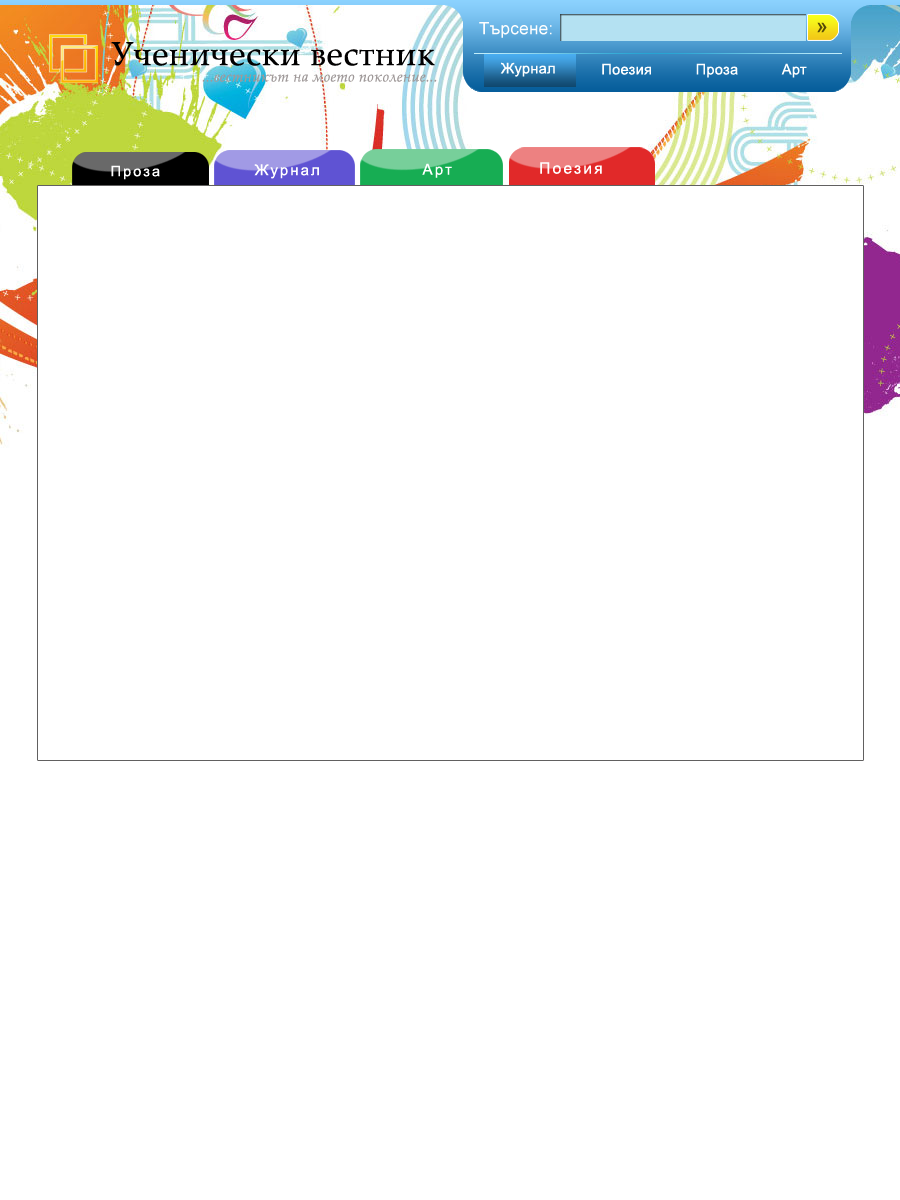
<style>
.page{position:relative;width:900px;height:1200px;background:#ffffff}
.page>*{position:absolute;margin:0}
.t1{font:17.1px "ArialMT";letter-spacing:0.02em;color:#fefefe}
.t2{font:20.8px "ArialMT";letter-spacing:0.14em;color:#564a08}
.t3{font:33.3px "PalatinoLinotype-Roman";letter-spacing:0.02em;color:#010000}
.t4{font:14.6px "ArialMT";letter-spacing:0.02em;color:#ffffff}
.t5{font:14.6px "PalatinoLinotype-Italic";letter-spacing:0.02em;color:#9f9999}
.t6{font:14.6px "ArialMT";letter-spacing:0.14em;color:#ffffff}
.t7{font:15px "ArialMT";letter-spacing:0.14em;color:#ffffff}
.t8{font:15.2px "ArialMT";letter-spacing:0.14em;color:#ffffff}
.t9{font:15.6px "ArialMT";letter-spacing:0.14em;color:#ffffff}
</style>
<div class="page">
<p class="t1" style="left:479px;top:22px;width:73px;height:16px">Търсене:</p>
<p class="t2" style="left:817px;top:22px;width:10px;height:11px">»</p>
<p class="t3" style="left:111px;top:42px;width:324px;height:24px">Ученически вестник</p>
<p class="t4" style="left:500px;top:62px;width:55px;height:15px">Журнал</p>
<p class="t4" style="left:602px;top:63px;width:205px;height:15px">Поезия          Проза          Арт</p>
<p class="t5" style="left:202px;top:74px;width:235px;height:8px">...вестникът на моето поколение...</p>
<p class="t6" style="left:111px;top:165px;width:49px;height:15px">Проза</p>
<p class="t7" style="left:254px;top:164px;width:65px;height:15px">Журнал</p>
<p class="t8" style="left:422px;top:163px;width:30px;height:15px">Арт</p>
<p class="t9" style="left:540px;top:162px;width:62px;height:12px">Поезия</p>
</div>
